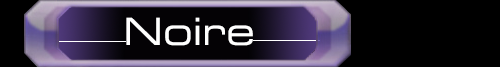
<style>
.page{position:relative;width:500px;height:67px;background:#000000}
.page>*{position:absolute;margin:0}
.t1{font:37.3px "Square721BT-RomanExtended";color:#ffffff}
</style>
<div class="page">
<p class="t1" style="left:126px;top:17px;width:127px;height:29px">Noire</p>
</div>
